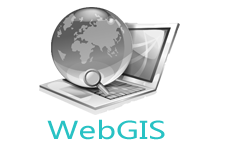
<style>
.page{position:relative;width:226px;height:150px;background:#ffffff}
.page>*{position:absolute;margin:0}
.t1{font:24px "MicrosoftYaHei";color:#28c2c4;scale:1.29 1}
</style>
<div class="page">
<p class="t1" style="left:47px;top:119px;width:118px;height:21px">WebGIS</p>
</div>
